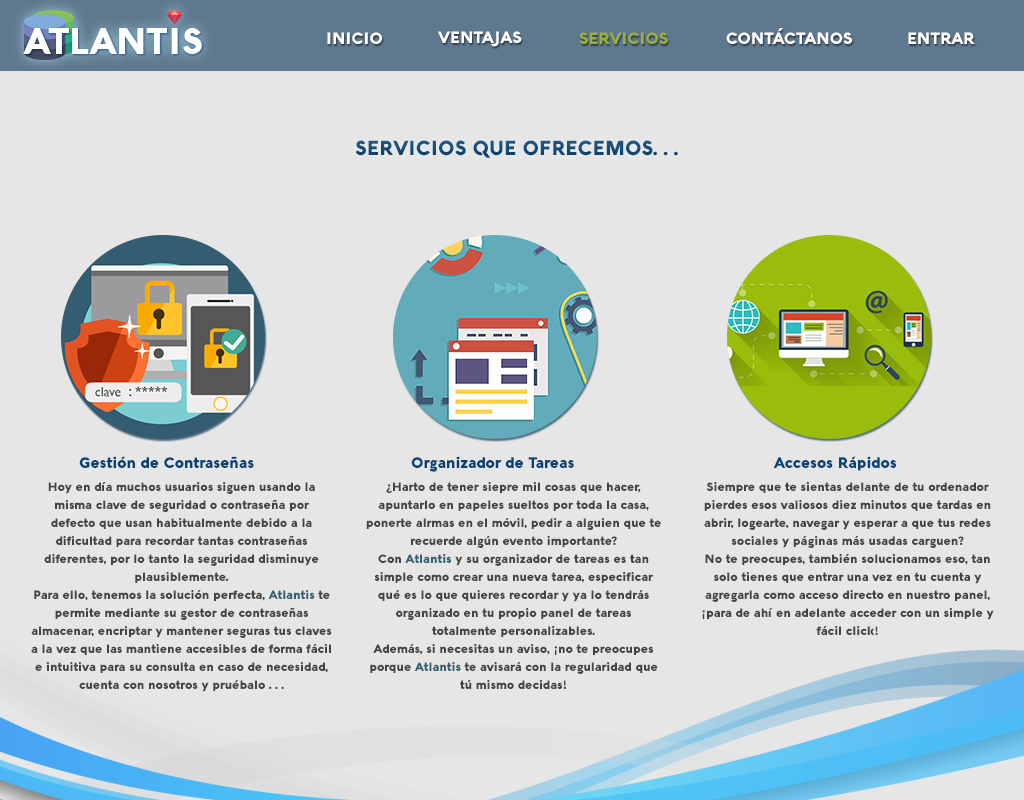
<style>
.page{position:relative;width:1024px;height:800px;background:#e6e6e6}
.page>*{position:absolute;margin:0}
.t1{font:16px "Aquawax-Black";color:#ffffff}
.t2{font:16px "Aquawax-Black";color:#99af3b}
.t3{font:16px "Aquawax-Black";color:#fffffe}
.t4{font:20px "Aquawax-Black";color:#084274}
.t5{font:15px "Aquawax-Black";color:#084274}
.t6{font:12px/18px "Aquawax-Black";color:#444444}
.t7{font:12px/18px "Aquawax-Black";color:#345d71}
</style>
<div class="page">
<p class="t1" style="left:726px;top:28px;width:126px;height:16px">CONTÁCTANOS</p>
<p class="t1" style="left:327px;top:32px;width:55px;height:12px">INICIO</p>
<p class="t1" style="left:438px;top:31px;width:84px;height:16px">VENTAJAS</p>
<p class="t2" style="left:579px;top:32px;width:89px;height:12px">SERVICIOS</p>
<p class="t3" style="left:908px;top:32px;width:67px;height:12px">ENTRAR</p>
<p class="t4" style="left:355px;top:140px;width:323px;height:18px">SERVICIOS QUE OFRECEMOS. . .</p>
<p class="t5" style="left:79px;top:456px;width:175px;height:12px">Gestión de Contraseñas</p>
<p class="t5" style="left:411px;top:456px;width:163px;height:16px">Organizador de Tareas</p>
<p class="t5" style="left:773px;top:456px;width:123px;height:15px">Accesos Rápidos</p>
<p class="t6" style="left:31px;top:482px;width:301px;height:210px;text-align:center">Hoy en día muchos usuarios siguen usando la misma clave de seguridad o contraseña por defecto que usan habitualmente debido a la dificultad para recordar tantas contraseñas diferentes, por lo tanto la seguridad disminuye plausiblemente.<br>Para ello, tenemos la solución perfecta, <span class="t7">Atlantis</span> te permite mediante su gestor de contraseñas almacenar, encriptar y mantener seguras tus claves a la vez que las mantiene accesibles de forma fácil e intuitiva para su consulta en caso de necesidad, cuenta con nosotros y pruébalo . . .</p>
<p class="t6" style="left:366px;top:482px;width:295px;height:207px;text-align:center">¿Harto de tener siepre mil cosas que hacer, apuntarlo en papeles sueltos por toda la casa, ponerte alrmas en el móvil, pedir a alguien que te recuerde algún evento importante?<br>Con <span class="t7">Atlantis </span>y su organizador de tareas es tan simple como crear una nueva tarea, especificar qué es lo que quieres recordar y ya lo tendrás organizado en tu propio panel de tareas totalmente personalizables.<br>Además, si necesitas un aviso, ¡no te preocupes porque <span class="t7">Atlantis</span> te avisará con la regularidad que tú mismo decidas!</p>
<p class="t6" style="left:702px;top:482px;width:292px;height:153px;text-align:center">Siempre que te sientas delante de tu ordenador pierdes esos valiosos diez minutos que tardas en abrir, logearte, navegar y esperar a que tus redes sociales y páginas más usadas carguen?<br>No te preocupes, también solucionamos eso, tan solo tienes que entrar una vez en tu cuenta y agregarla como acceso directo en nuestro panel, ¡para de ahí en adelante acceder con un simple y fácil click!</p>
</div>
